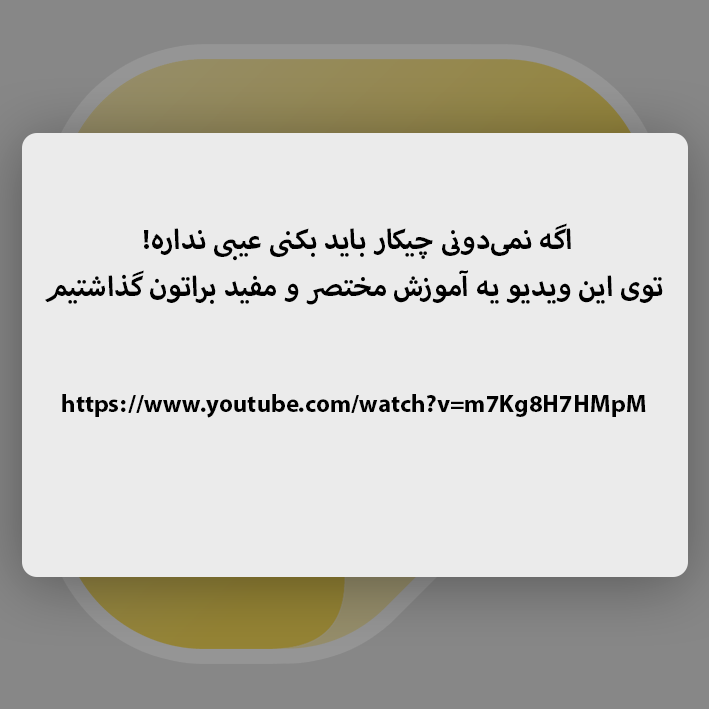
<style>
.page{position:relative;width:709px;height:709px;background:#ebebeb}
.page>*{position:absolute;margin:0}
.t1{font:39.1px "MyriadArabic-Bold";color:#000000}
.t2{font:34.6px "MyriadArabic-Bold";color:#000000}
</style>
<div class="page">
<p class="t1" style="left:45px;top:223px;width:618px;height:82px;text-align:center">اگه نمی‌دونی چیکار باید بکنی عیبی نداره! <br>توی این ویدیو یه آموزش مختصر و مفید براتون گذاشتیم</p>
<p class="t2" style="left:62px;top:394px;width:584px;height:24px">https://www.youtube.com/watch?v=m7Kg8H7HMpM</p>
</div>
